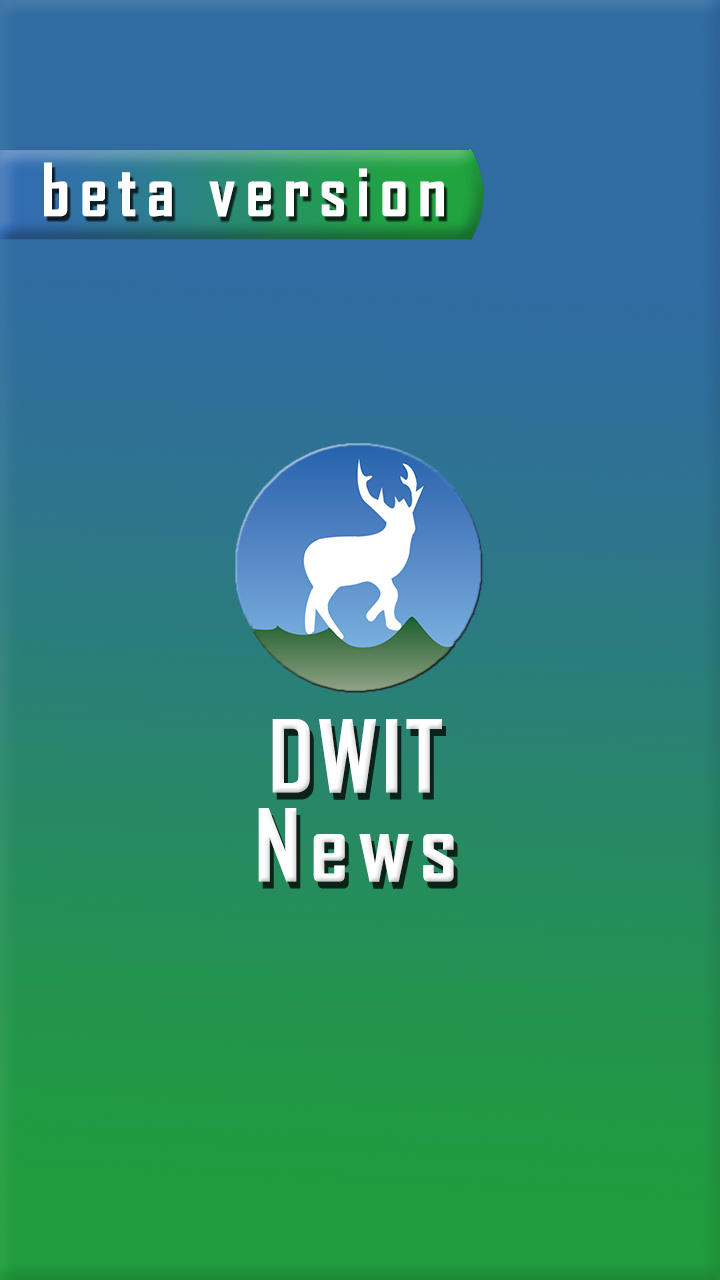
<style>
.page{position:relative;width:720px;height:1280px}
.page>*{position:absolute;margin:0}
.t1{font:70px "AgencyFB-Bold";letter-spacing:0.14em;color:#ffffff}
.t2{font:96px/89px "AgencyFB-Bold";letter-spacing:0.04em;color:#ffffff}
.t3{font:96px/89px "AgencyFB-Bold";letter-spacing:0.1em;color:#ffffff}
</style>
<div class="page">
<p class="t1" style="left:44px;top:162px;width:400px;height:55px">beta version</p>
<p class="t2" style="left:258px;top:719px;width:196px;height:163px;text-align:center">DWIT<br><span class="t3"> News</span></p>
</div>
